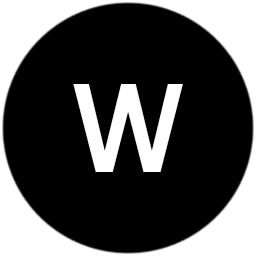
<style>
.page{position:relative;width:256px;height:256px;background:#000000}
.page>*{position:absolute;margin:0}
.t1{font:125px "Purista-SemiBold";color:#ffffff}
</style>
<div class="page">
<p class="t1" style="left:73px;top:84px;width:110px;height:88px">W</p>
</div>
